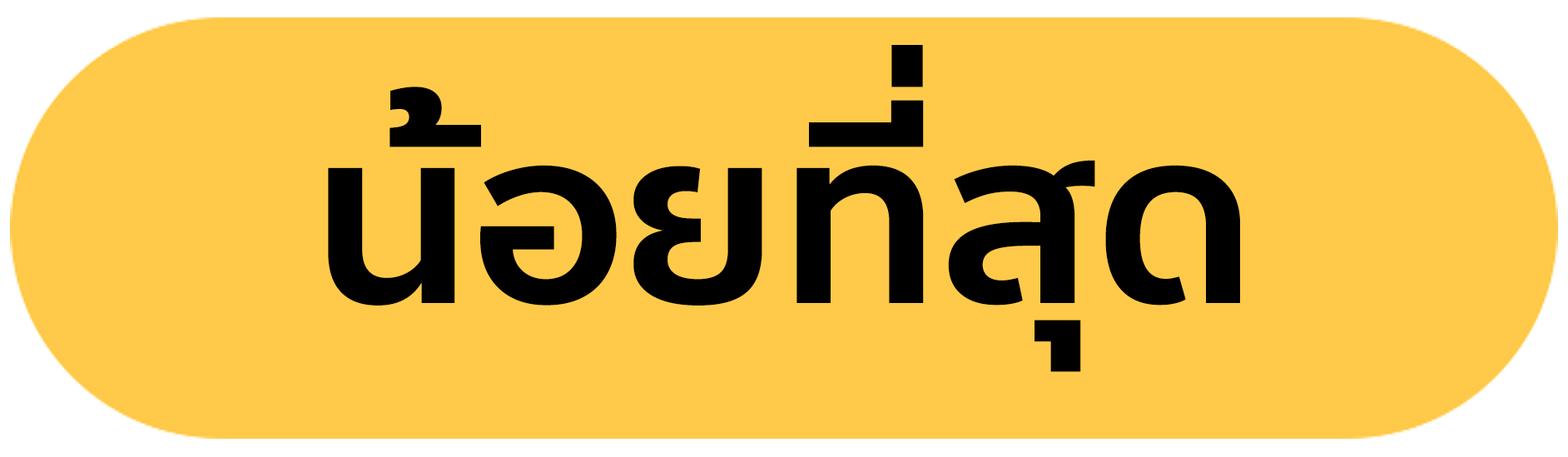
<style>
.page{position:relative;width:1568px;height:457px;background:#ffca4a}
.page>*{position:absolute;margin:0}
.t1{font:249.7px "Anakotmai-Medium";color:#000000}
</style>
<div class="page">
<p class="t1" style="left:328px;top:45px;width:912px;height:327px">น้อยที่สุด</p>
</div>
